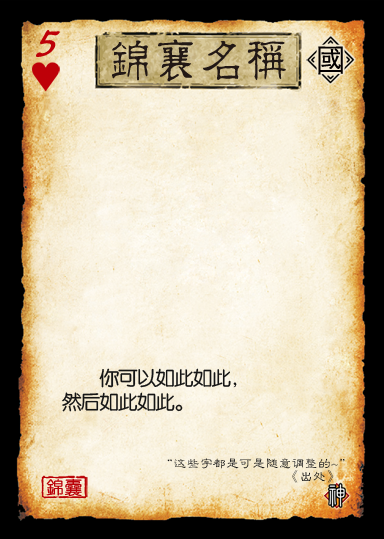
<style>
.page{position:relative;width:384px;height:539px}
.page>*{position:absolute;margin:0}
.t1{font:48.1px "Jxixinkai";color:#be0008;font-weight:bold;font-style:italic}
.t2{font:48.1px "¾­µä·±½ÇÁ¥ Regular";color:#221815;scale:0.95 1}
.t3{font:32.8px "STXihei";color:#040000}
.t4{font:19.7px/24px "FZY3JW--GB1-0";letter-spacing:-0.05em;color:#151515}
.t5{font:13.1px/13.1px "FZLBJW--GB1-0";color:#151515}
.t6{font:17.5px "YouYuan";color:#ba0007;font-weight:bold}
</style>
<div class="page">
<p class="t1" style="left:36px;top:30px;width:24px;height:27px">5</p>
<p class="t2" style="left:112px;top:39px;width:174px;height:43px">锦襄名称</p>
<p class="t3" style="left:318px;top:46px;width:25px;height:29px">國</p>
<p class="t4" style="left:62px;top:368px;width:175px;height:44px">你可以如此如此，<br>然后如此如此。</p>
<p class="t5" style="left:167px;top:458px;width:178px;height:25px;text-align:right">“这些字都是可是随意调整的~”<br>                                      《出处》</p>
<p class="t6" style="left:46px;top:478px;width:36px;height:19px">錦囊</p>
</div>
